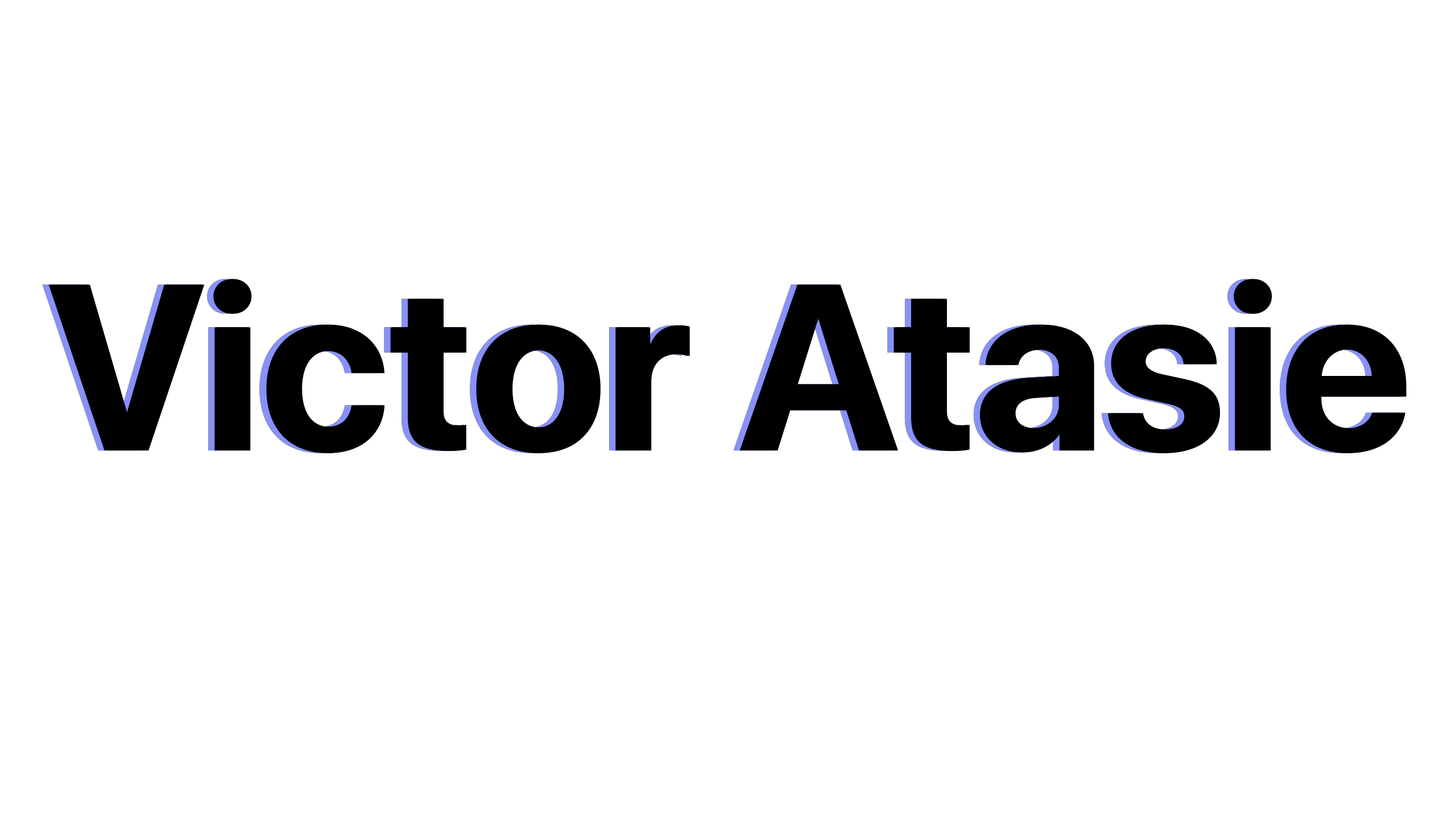
<style>
.page{position:relative;width:1456px;height:819px;background:#ffffff}
.page>*{position:absolute;margin:0}
.t1{font:235.3px "SFProDisplay-Bold";color:#000000}
</style>
<div class="page">
<p class="t1" style="left:42px;top:279px;width:1356px;height:174px">Victor Atasie</p>
<p class="t1" style="left:42px;top:279px;width:1356px;height:174px">Victor Atasie</p>
<p class="t1" style="left:42px;top:279px;width:1356px;height:174px">Victor Atasie</p>
<p class="t1" style="left:48px;top:279px;width:1356px;height:174px">Victor Atasie</p>
<p class="t1" style="left:51px;top:279px;width:1356px;height:174px">Victor Atasie</p>
</div>
